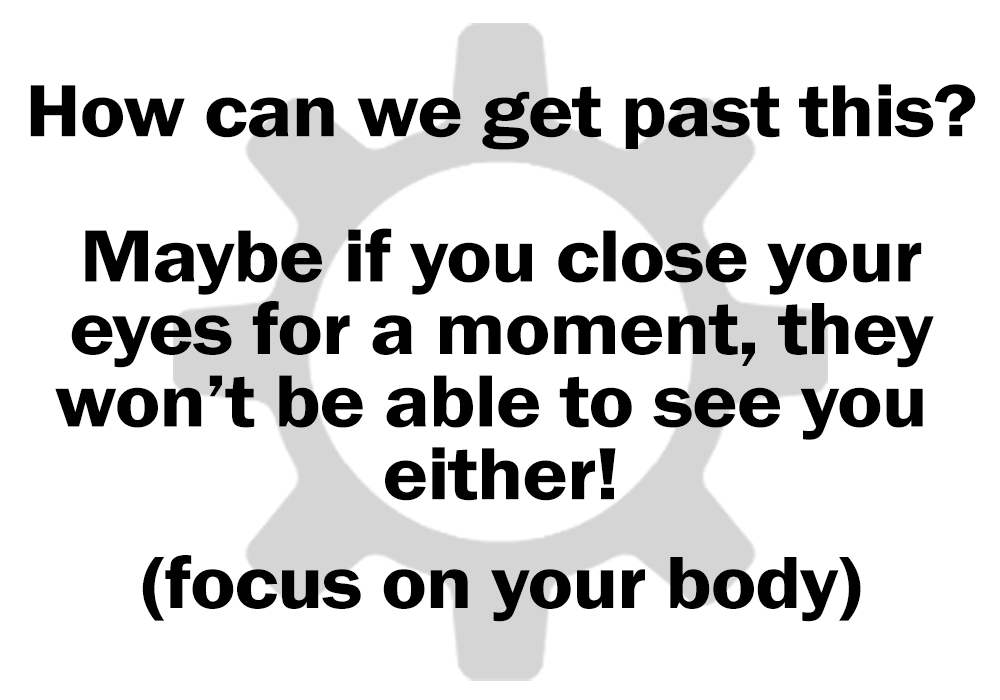
<style>
.page{position:relative;width:1000px;height:700px;background:#ffffff}
.page>*{position:absolute;margin:0}
.t1{font:76.6px/36.3px "FranklinGothic-Demi";letter-spacing:-0.02em;color:#000000;scale:1.13 1}
</style>
<div class="page">
<p class="t1" style="left:30px;top:84px;width:946px;height:538px;text-align:center">How can we get past this?<br><br><br><br>Maybe if you close your<br><br>eyes for a moment, they<br><br>won’t be able to see you <br><br>either!<br><br><br>(focus on your body)</p>
</div>
